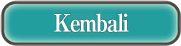
<style>
.page{position:relative;width:181px;height:46px}
.page>*{position:absolute;margin:0}
.t1{font:24px "RyuminPro-ExBold";letter-spacing:-0.08em;color:#ffffff;scale:0.9 1}
</style>
<div class="page">
<p class="t1" style="left:54px;top:13px;width:75px;height:19px">Kembali</p>
</div>
